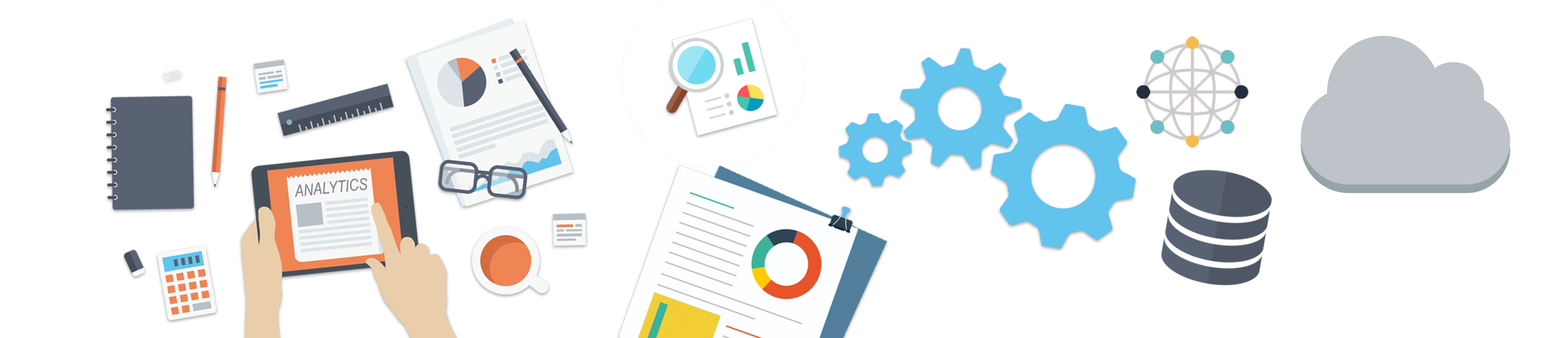
<style>
.page{position:relative;width:1568px;height:338px;background:#ffffff}
.page>*{position:absolute;margin:0}
.t1{font:16.3px "ArialNarrow-Italic";color:#7a8085}
</style>
<div class="page">
<p class="t1" style="left:295px;top:177px;width:73px;height:20px;rotate:-6deg">ANALYTICS</p>
</div>
